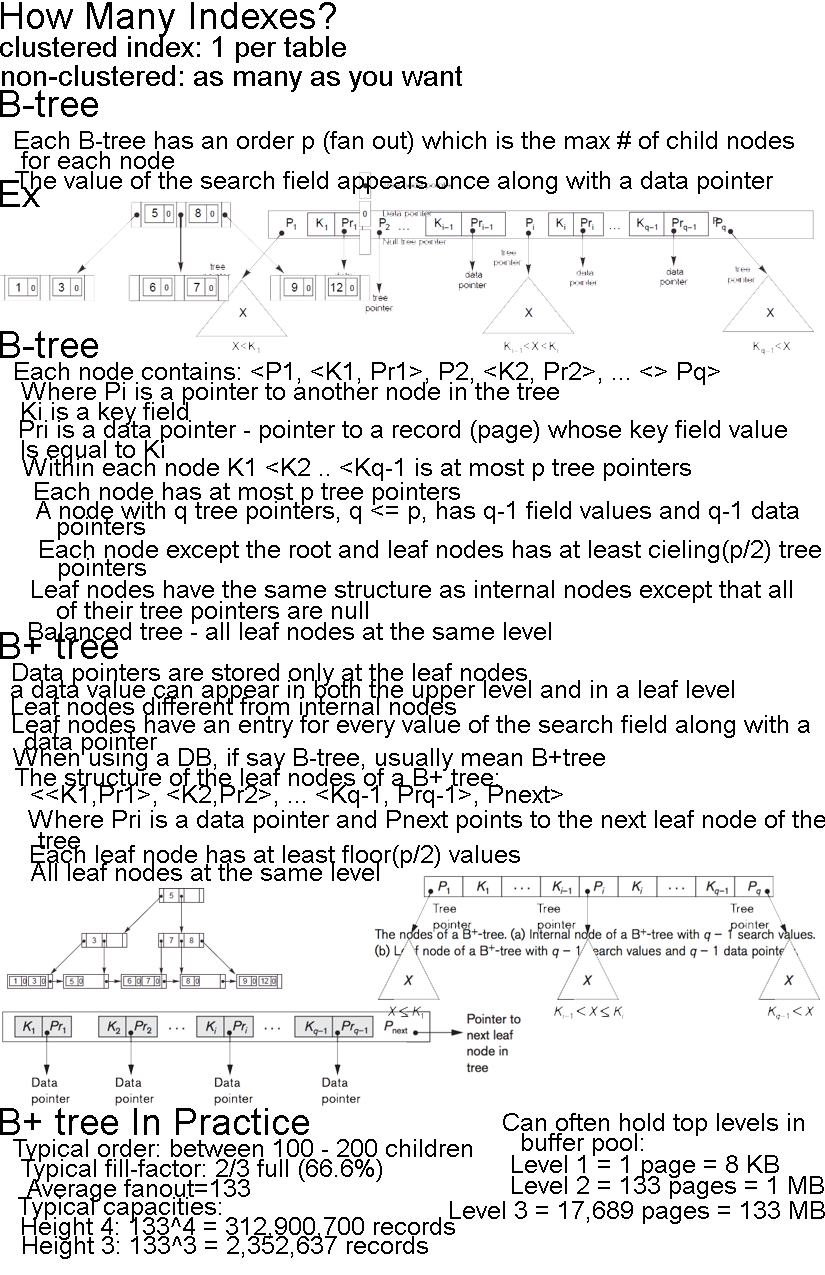
<style>
.page{position:relative;width:825px;height:1275px;background:#ffffff}
.page>*{position:absolute;margin:0}
.t1{font:37.5px "ArialMT";color:#000000}
.t2{font:29.2px "ArialMT";color:#000000}
.t3{font:25px "ArialMT";color:#000000}
</style>
<div class="page">
<p class="t1" style="left:1px;top:2px;width:335px;height:35px">How Many Indexes?</p>
<p class="t2" style="left:0px;top:36px;width:346px;height:27px">clustered index: 1 per table</p>
<p class="t2" style="left:2px;top:65px;width:460px;height:27px">non-clustered: as many as you want</p>
<p class="t1" style="left:0px;top:90px;width:98px;height:27px">B-tree</p>
<p class="t3" style="left:15px;top:131px;width:779px;height:23px">Each B-tree has an order p (fan out) which is the max # of child nodes</p>
<p class="t3" style="left:21px;top:151px;width:153px;height:18px">for each node</p>
<p class="t3" style="left:15px;top:171px;width:758px;height:23px">The value of the search field appears once along with a data pointer</p>
<p class="t1" style="left:0px;top:180px;width:40px;height:27px">Ex</p>
<p class="t1" style="left:0px;top:331px;width:98px;height:27px">B-tree</p>
<p class="t3" style="left:15px;top:362px;width:705px;height:23px">Each node contains: &lt;P1, &lt;K1, Pr1&gt;, P2, &lt;K2, Pr2&gt;, ... &lt;&gt; Pq&gt;</p>
<p class="t3" style="left:21px;top:382px;width:538px;height:23px">Where Pi is a pointer to another node in the tree</p>
<p class="t3" style="left:22px;top:402px;width:166px;height:23px">Ki is a key field</p>
<p class="t3" style="left:20px;top:420px;width:767px;height:23px">Pri is a data pointer - pointer to a record (page) whose key field value</p>
<p class="t3" style="left:22px;top:440px;width:142px;height:23px">Is equal to Ki</p>
<p class="t3" style="left:22px;top:458px;width:669px;height:23px">Within each node K1 &lt;K2 .. &lt;Kq-1 is at most p tree pointers</p>
<p class="t3" style="left:35px;top:482px;width:425px;height:23px">Each node has at most p tree pointers</p>
<p class="t3" style="left:36px;top:501px;width:763px;height:23px">A node with q tree pointers, q &lt;= p, has q-1 field values and q-1 data</p>
<p class="t3" style="left:58px;top:517px;width:87px;height:23px">pointers</p>
<p class="t3" style="left:40px;top:540px;width:781px;height:23px">Each node except the root and leaf nodes has at least cieling(p/2) tree</p>
<p class="t3" style="left:59px;top:558px;width:87px;height:23px">pointers</p>
<p class="t3" style="left:32px;top:580px;width:760px;height:23px">Leaf nodes have the same structure as internal nodes except that all</p>
<p class="t3" style="left:57px;top:601px;width:311px;height:23px">of their tree pointers are null</p>
<p class="t3" style="left:29px;top:622px;width:522px;height:18px">Balanced tree - all leaf nodes at the same level</p>
<p class="t1" style="left:0px;top:632px;width:118px;height:27px">B+ tree</p>
<p class="t3" style="left:13px;top:663px;width:514px;height:23px">Data pointers are stored only at the leaf nodes</p>
<p class="t3" style="left:11px;top:680px;width:723px;height:23px">a data value can appear in both the upper level and in a leaf level</p>
<p class="t3" style="left:12px;top:697px;width:444px;height:18px">Leaf nodes different from internal nodes</p>
<p class="t3" style="left:13px;top:715px;width:797px;height:23px">Leaf nodes have an entry for every value of the search field along with a</p>
<p class="t3" style="left:25px;top:732px;width:132px;height:23px">data pointer</p>
<p class="t3" style="left:13px;top:748px;width:592px;height:23px">When using a DB, if say B-tree, usually mean B+tree</p>
<p class="t3" style="left:15px;top:768px;width:483px;height:18px">The structure of the leaf nodes of a B+ tree:</p>
<p class="t3" style="left:31px;top:785px;width:532px;height:23px">&lt;&lt;K1,Pr1&gt;, &lt;K2,Pr2&gt;, ... &lt;Kq-1, Prq-1&gt;, Pnext&gt;</p>
<p class="t3" style="left:28px;top:810px;width:798px;height:23px">Where Pri is a data pointer and Pnext points to the next leaf node of the</p>
<p class="t3" style="left:38px;top:832px;width:42px;height:17px">tree</p>
<p class="t3" style="left:31px;top:845px;width:489px;height:23px">Each leaf node has at least floor(p/2) values</p>
<p class="t3" style="left:31px;top:863px;width:348px;height:18px">All leaf nodes at the same level</p>
<p class="t1" style="left:0px;top:1108px;width:309px;height:27px">B+ tree In Practice</p>
<p class="t3" style="left:503px;top:1113px;width:301px;height:23px">Can often hold top levels in</p>
<p class="t3" style="left:522px;top:1133px;width:121px;height:23px">buffer pool:</p>
<p class="t3" style="left:13px;top:1139px;width:459px;height:23px">Typical order: between 100 - 200 children</p>
<p class="t3" style="left:512px;top:1155px;width:267px;height:23px">Level 1 = 1 page = 8 KB</p>
<p class="t3" style="left:21px;top:1159px;width:361px;height:23px">Typical fill-factor: 2/3 full (66.6%)</p>
<p class="t3" style="left:27px;top:1179px;width:223px;height:23px">Average fanout=133</p>
<p class="t3" style="left:512px;top:1176px;width:312px;height:23px">Level 2 = 133 pages = 1 MB</p>
<p class="t3" style="left:18px;top:1197px;width:203px;height:23px">Typical capacities:</p>
<p class="t3" style="left:450px;top:1201px;width:375px;height:23px">Level 3 = 17,689 pages = 133 MB</p>
<p class="t3" style="left:22px;top:1217px;width:433px;height:23px">Height 4: 133^4 = 312,900,700 records</p>
<p class="t3" style="left:23px;top:1236px;width:405px;height:23px">Height 3: 133^3 = 2,352,637 records</p>
</div>
